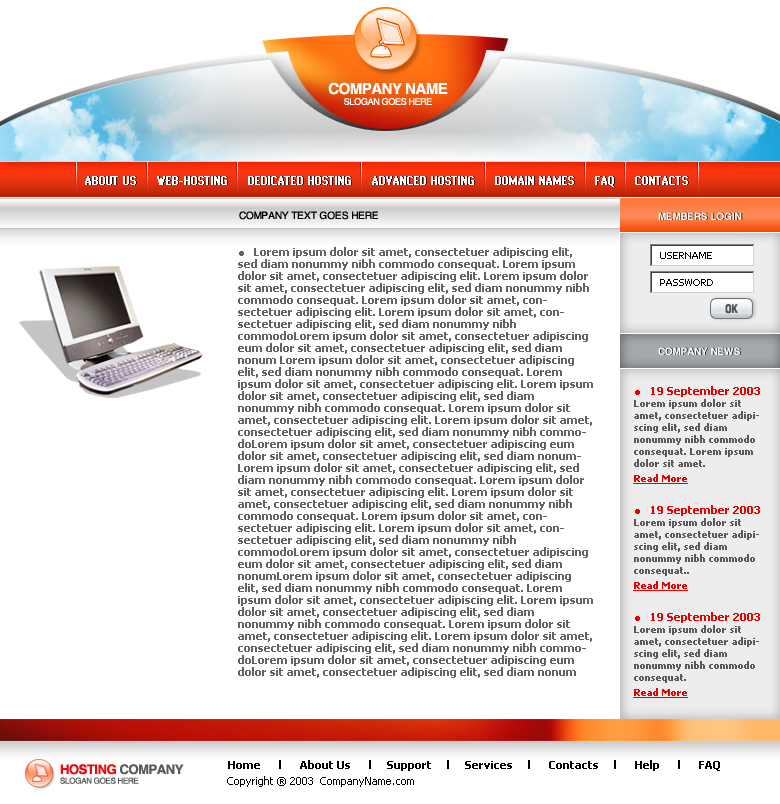
<style>
.page{position:relative;width:780px;height:804px;background:#ffffff}
.page>*{position:absolute;margin:0}
.t1{font:9px "Helios";letter-spacing:-0.04em;color:#ffffff}
.t2{font:15px "Helios-Bold";letter-spacing:-0.04em;color:#ffffff}
.t3{font:13px "WebCondensedC";color:#ffffff;font-weight:bold}
.t4{font:10px "Helios";letter-spacing:-0.02em;color:#000000}
.t5{font:10px "Helios-Bold";letter-spacing:-0.02em;color:#ffffff}
.t6{font:11px/12px "Tahoma-Bold";color:#636363}
.t7{font:9px/27px "Tahoma";color:#000000}
.t8{font:12px "HeliosCond-Bold";letter-spacing:-0.02em;color:#535353}
.t9{font:10px/12px "Tahoma-Bold";color:#5a5a5a}
.t10{font:11px/13px "Tahoma-Bold";color:#ea0000}
.t11{font:10px/3px "Tahoma-Bold";color:#ea0000;text-decoration:underline}
.t12{font:11px "Tahoma-Bold";color:#000000}
.t13{font:8px "Helios";letter-spacing:-0.04em;color:#5c5c5c}
.t14{font:13px "Helios-Bold";letter-spacing:-0.04em;color:#ea0a14}
.t15{font:13px "Helios-Bold";letter-spacing:-0.04em;color:#5c5c5c}
.t16{font:11px "Tahoma";color:#000000}
</style>
<div class="page">
<p class="t1" style="left:328px;top:82px;width:120px;height:23px;text-align:center"><span class="t2">COMPANY NAME<br></span>SLOGAN GOES HERE</p>
<p class="t3" style="left:85px;top:176px;width:603px;height:11px">ABOUT US     WEB-HOSTING     DEDICATED HOSTING     ADVANCED HOSTING     DOMAIN NAMES     FAQ     CONTACTS</p>
<p class="t4" style="left:239px;top:211px;width:139px;height:9px">COMPANY TEXT GOES HERE</p>
<p class="t5" style="left:658px;top:212px;width:84px;height:8px">MEMBERS LOGIN</p>
<p class="t6" style="left:238px;top:247px;width:355px;height:431px">●   Lorem ipsum dolor sit amet, consectetuer adipiscing elit, sed diam nonummy nibh commodo consequat. Lorem ipsum dolor sit amet, consectetuer adipiscing elit. Lorem ipsum dolor sit amet, consectetuer adipiscing elit, sed diam nonummy nibh commodo consequat. Lorem ipsum dolor sit amet, consectetuer adipiscing elit. Lorem ipsum dolor sit amet, consectetuer adipiscing elit, sed diam nonummy nibh commodoLorem ipsum dolor sit amet, consectetuer adipiscing eum dolor sit amet, consectetuer adipiscing elit, sed diam nonum Lorem ipsum dolor sit amet, consectetuer adipiscing elit, sed diam nonummy nibh commodo consequat. Lorem ipsum dolor sit amet, consectetuer adipiscing elit. Lorem ipsum dolor sit amet, consectetuer adipiscing elit, sed diam nonummy nibh commodo consequat. Lorem ipsum dolor sit amet, consectetuer adipiscing elit. Lorem ipsum dolor sit amet, consectetuer adipiscing elit, sed diam nonummy nibh commodoLorem ipsum dolor sit amet, consectetuer adipiscing eum dolor sit amet, consectetuer adipiscing elit, sed diam nonumLorem ipsum dolor sit amet, consectetuer adipiscing elit, sed diam nonummy nibh commodo consequat. Lorem ipsum dolor sit amet, consectetuer adipiscing elit. Lorem ipsum dolor sit amet, consectetuer adipiscing elit, sed diam nonummy nibh commodo consequat. Lorem ipsum dolor sit amet, consectetuer adipiscing elit. Lorem ipsum dolor sit amet, consectetuer adipiscing elit, sed diam nonummy nibh commodoLorem ipsum dolor sit amet, consectetuer adipiscing eum dolor sit amet, consectetuer adipiscing elit, sed diam nonumLorem ipsum dolor sit amet, consectetuer adipiscing elit, sed diam nonummy nibh commodo consequat. Lorem ipsum dolor sit amet, consectetuer adipiscing elit. Lorem ipsum dolor sit amet, consectetuer adipiscing elit, sed diam nonummy nibh commodo consequat. Lorem ipsum dolor sit amet, consectetuer adipiscing elit. Lorem ipsum dolor sit amet, consectetuer adipiscing elit, sed diam nonummy nibh commodoLorem ipsum dolor sit amet, consectetuer adipiscing eum dolor sit amet, consectetuer adipiscing elit, sed diam nonum</p>
<p class="t7" style="left:660px;top:252px;width:53px;height:34px">USERNAME<br>PASSWORD</p>
<p class="t8" style="left:725px;top:304px;width:13px;height:10px">OK</p>
<p class="t5" style="left:658px;top:347px;width:82px;height:8px">COMPANY NEWS</p>
<p class="t9" style="left:633px;top:386px;width:127px;height:98px"><span class="t10">●   19 September 2003<br></span>Lorem ipsum dolor sit amet, consectetuer adipiscing elit, sed diam nonummy nibh commodo consequat. Lorem ipsum dolor sit amet.<br><br><span class="t11">Read More</span></p>
<p class="t9" style="left:633px;top:505px;width:127px;height:86px"><span class="t10">●   19 September 2003<br></span>Lorem ipsum dolor sit amet, consectetuer adipiscing elit, sed diam nonummy nibh commodo consequat..<br><br><span class="t11">Read More</span></p>
<p class="t9" style="left:633px;top:612px;width:127px;height:86px"><span class="t10">●   19 September 2003<br></span>Lorem ipsum dolor sit amet, consectetuer adipiscing elit, sed diam nonummy nibh commodo consequat.<br><br><span class="t11">Read More</span></p>
<p class="t12" style="left:228px;top:760px;width:492px;height:11px">Home      l      About Us      l     Support     l     Services     l      Contacts     l      Help      l      FAQ</p>
<p class="t13" style="left:60px;top:764px;width:124px;height:20px"><span class="t14">HOSTING</span><span class="t15"> COMPANY<br></span>SLOGAN GOES HERE</p>
<p class="t16" style="left:227px;top:776px;width:187px;height:11px">Copyright ® 2003  CompanyName.com</p>
</div>
